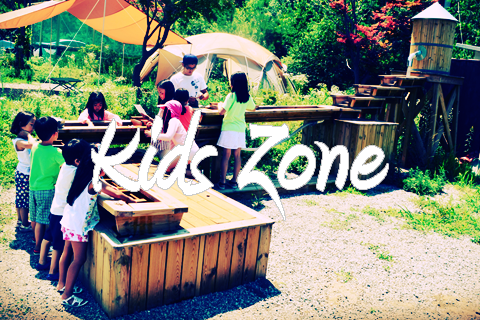
<style>
.page{position:relative;width:480px;height:320px}
.page>*{position:absolute;margin:0}
.t1{font:128px "Amienne-Bold";color:#ffffff}
</style>
<div class="page">
<p class="t1" style="left:92px;top:110px;width:296px;height:110px">Kids Zone</p>
</div>
